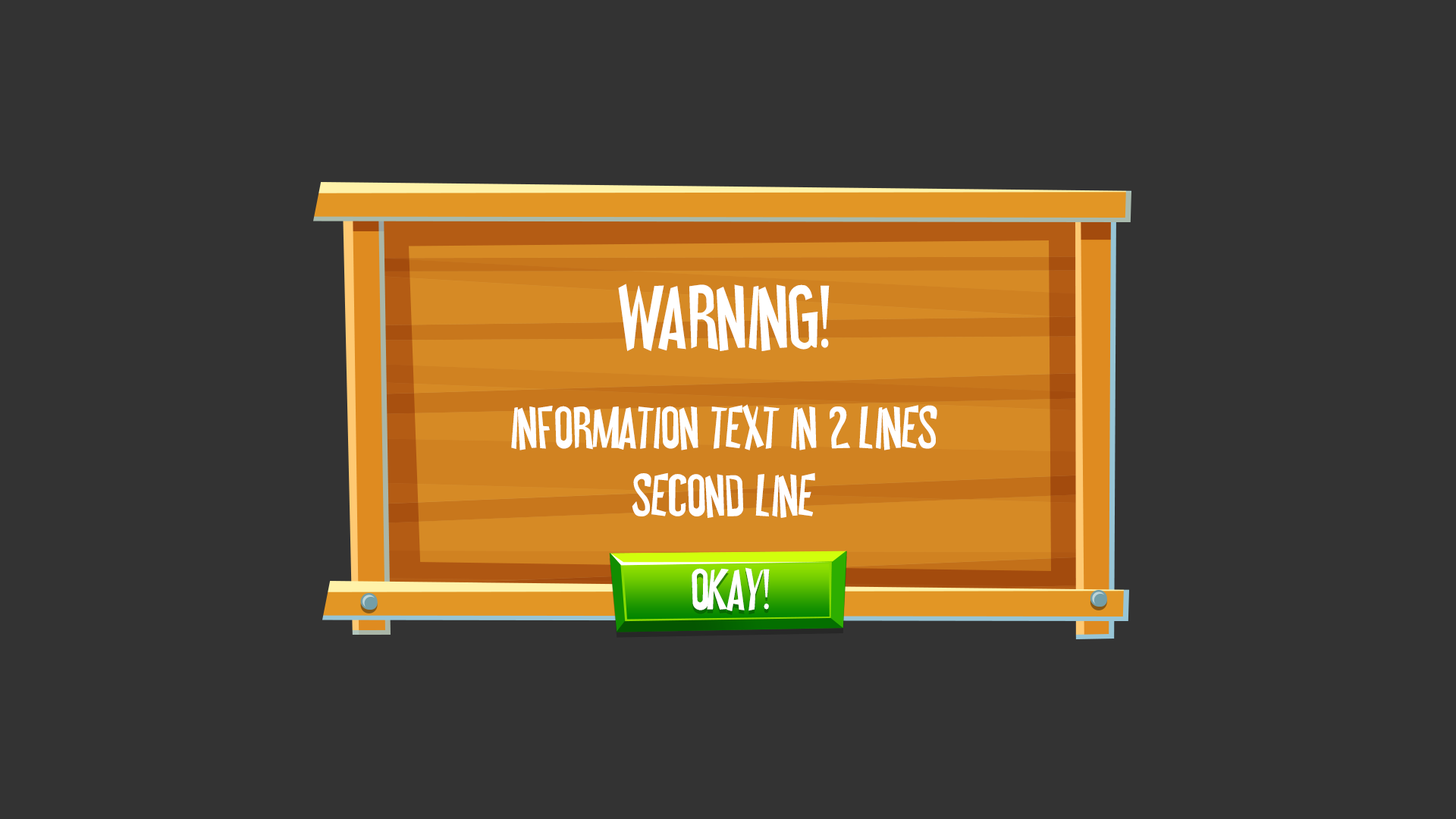
<style>
.page{position:relative;width:1456px;height:819px;background:#333333}
.page>*{position:absolute;margin:0}
.t1{font:86.1px "WickedScaryMovie";letter-spacing:0.02em;color:#ffffff;text-transform:uppercase}
.t2{font:56.5px "WickedScaryMovie";letter-spacing:0.02em;color:#ffffff;text-transform:uppercase}
.t3{font:55.4px "WickedScaryMovie";color:#ffffff;text-transform:uppercase}
</style>
<div class="page">
<p class="t1" style="left:618px;top:284px;width:212px;height:67px">warning!</p>
<p class="t2" style="left:511px;top:404px;width:426px;height:114px;text-align:center">information text in 2 lines<br>second line</p>
<p class="t3" style="left:692px;top:567px;width:78px;height:44px">okay!</p>
</div>
